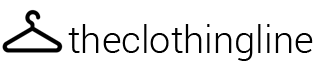
<style>
.page{position:relative;width:320px;height:64px;background:#ffffff}
.page>*{position:absolute;margin:0}
.t1{font:38px "Roboto-Light";color:#000000}
</style>
<div class="page">
<p class="t1" style="left:68px;top:24px;width:245px;height:37px">theclothingline</p>
</div>
